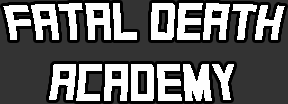
<style>
.page{position:relative;width:288px;height:104px;background:#333333}
.page>*{position:absolute;margin:0}
.t1{font:48px "SquareFont";color:#fefefe}
</style>
<div class="page">
<p class="t1" style="left:3px;top:3px;width:282px;height:98px;text-align:center">FATAL DEATH<br>ACADEMY</p>
</div>
